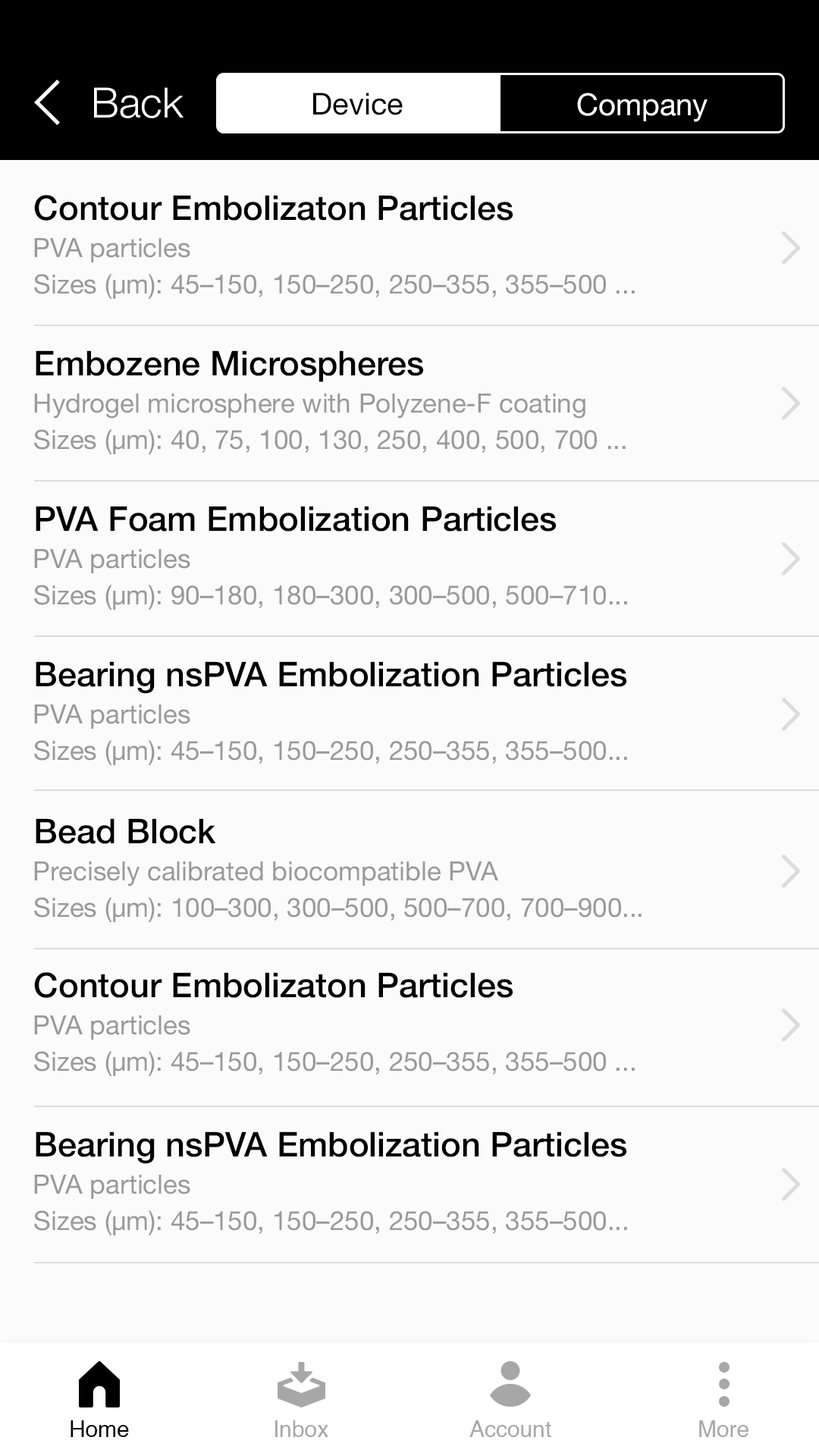
<style>
.page{position:relative;width:819px;height:1456px;background:#fbfbfb}
.page>*{position:absolute;margin:0}
.t1{font:41.7px "HelveticaNeue-Light";color:#ffffff}
.t2{font:30.3px "HelveticaNeue";color:#000000}
.t3{font:30.3px "HelveticaNeue";color:#ffffff}
.t4{font:34.1px "HelveticaNeue-Medium";color:#000000}
.t5{font:26.5px "HelveticaNeue";color:#999999}
.t6{font:22.7px "Helvetica";color:#000000}
.t7{font:22.7px "Helvetica";color:#a7a7a7}
</style>
<div class="page">
<p class="t1" style="left:94px;top:87px;width:90px;height:31px">Back</p>
<p class="t2" style="left:313px;top:93px;width:90px;height:22px">Device</p>
<p class="t3" style="left:577px;top:93px;width:131px;height:29px">Company</p>
<p class="t4" style="left:34px;top:195px;width:479px;height:26px">Contour Embolizaton Particles</p>
<p class="t5" style="left:34px;top:238px;width:156px;height:24px">PVA particles</p>
<p class="t5" style="left:34px;top:274px;width:601px;height:25px">Sizes (µm): 45–150, 150–250, 250–355, 355–500 ...</p>
<p class="t4" style="left:36px;top:350px;width:388px;height:32px">Embozene Microspheres</p>
<p class="t5" style="left:34px;top:394px;width:551px;height:25px">Hydrogel microsphere with Polyzene-F coating</p>
<p class="t5" style="left:34px;top:429px;width:592px;height:25px">Sizes (µm): 40, 75, 100, 130, 250, 400, 500, 700 ...</p>
<p class="t4" style="left:36px;top:506px;width:521px;height:26px">PVA Foam Embolization Particles</p>
<p class="t5" style="left:34px;top:549px;width:156px;height:24px">PVA particles</p>
<p class="t5" style="left:34px;top:585px;width:593px;height:25px">Sizes (µm): 90–180, 180–300, 300–500, 500–710...</p>
<p class="t4" style="left:36px;top:661px;width:591px;height:33px">Bearing nsPVA Embolization Particles</p>
<p class="t5" style="left:34px;top:704px;width:156px;height:25px">PVA particles</p>
<p class="t5" style="left:34px;top:740px;width:593px;height:25px">Sizes (µm): 45–150, 150–250, 250–355, 355–500...</p>
<p class="t4" style="left:36px;top:818px;width:180px;height:26px">Bead Block</p>
<p class="t5" style="left:34px;top:861px;width:464px;height:25px">Precisely calibrated biocompatible PVA</p>
<p class="t5" style="left:34px;top:897px;width:608px;height:25px">Sizes (µm): 100–300, 300–500, 500–700, 700–900...</p>
<p class="t4" style="left:34px;top:972px;width:479px;height:26px">Contour Embolizaton Particles</p>
<p class="t5" style="left:34px;top:1015px;width:156px;height:25px">PVA particles</p>
<p class="t5" style="left:34px;top:1051px;width:601px;height:25px">Sizes (µm): 45–150, 150–250, 250–355, 355–500 ...</p>
<p class="t4" style="left:36px;top:1131px;width:591px;height:33px">Bearing nsPVA Embolization Particles</p>
<p class="t5" style="left:34px;top:1175px;width:156px;height:24px">PVA particles</p>
<p class="t5" style="left:34px;top:1210px;width:593px;height:25px">Sizes (µm): 45–150, 150–250, 250–355, 355–500...</p>
<p class="t6" style="left:71px;top:1420px;width:58px;height:17px">Home</p>
<p class="t7" style="left:275px;top:1420px;width:53px;height:17px">Inbox</p>
<p class="t7" style="left:469px;top:1420px;width:82px;height:17px">Account</p>
<p class="t7" style="left:699px;top:1420px;width:49px;height:17px">More</p>
</div>
